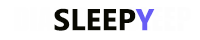
<style>
.page{position:relative;width:200px;height:40px;background:#ffffff}
.page>*{position:absolute;margin:0}
.t1{font:30px "MyanmarText-Bold";color:#090902}
.t2{font:30px "MyanmarText-Bold";color:#675cf5}
</style>
<div class="page">
<p class="t1" style="left:54px;top:8px;width:101px;height:23px">SLEEP<span class="t2">Y</span></p>
</div>
